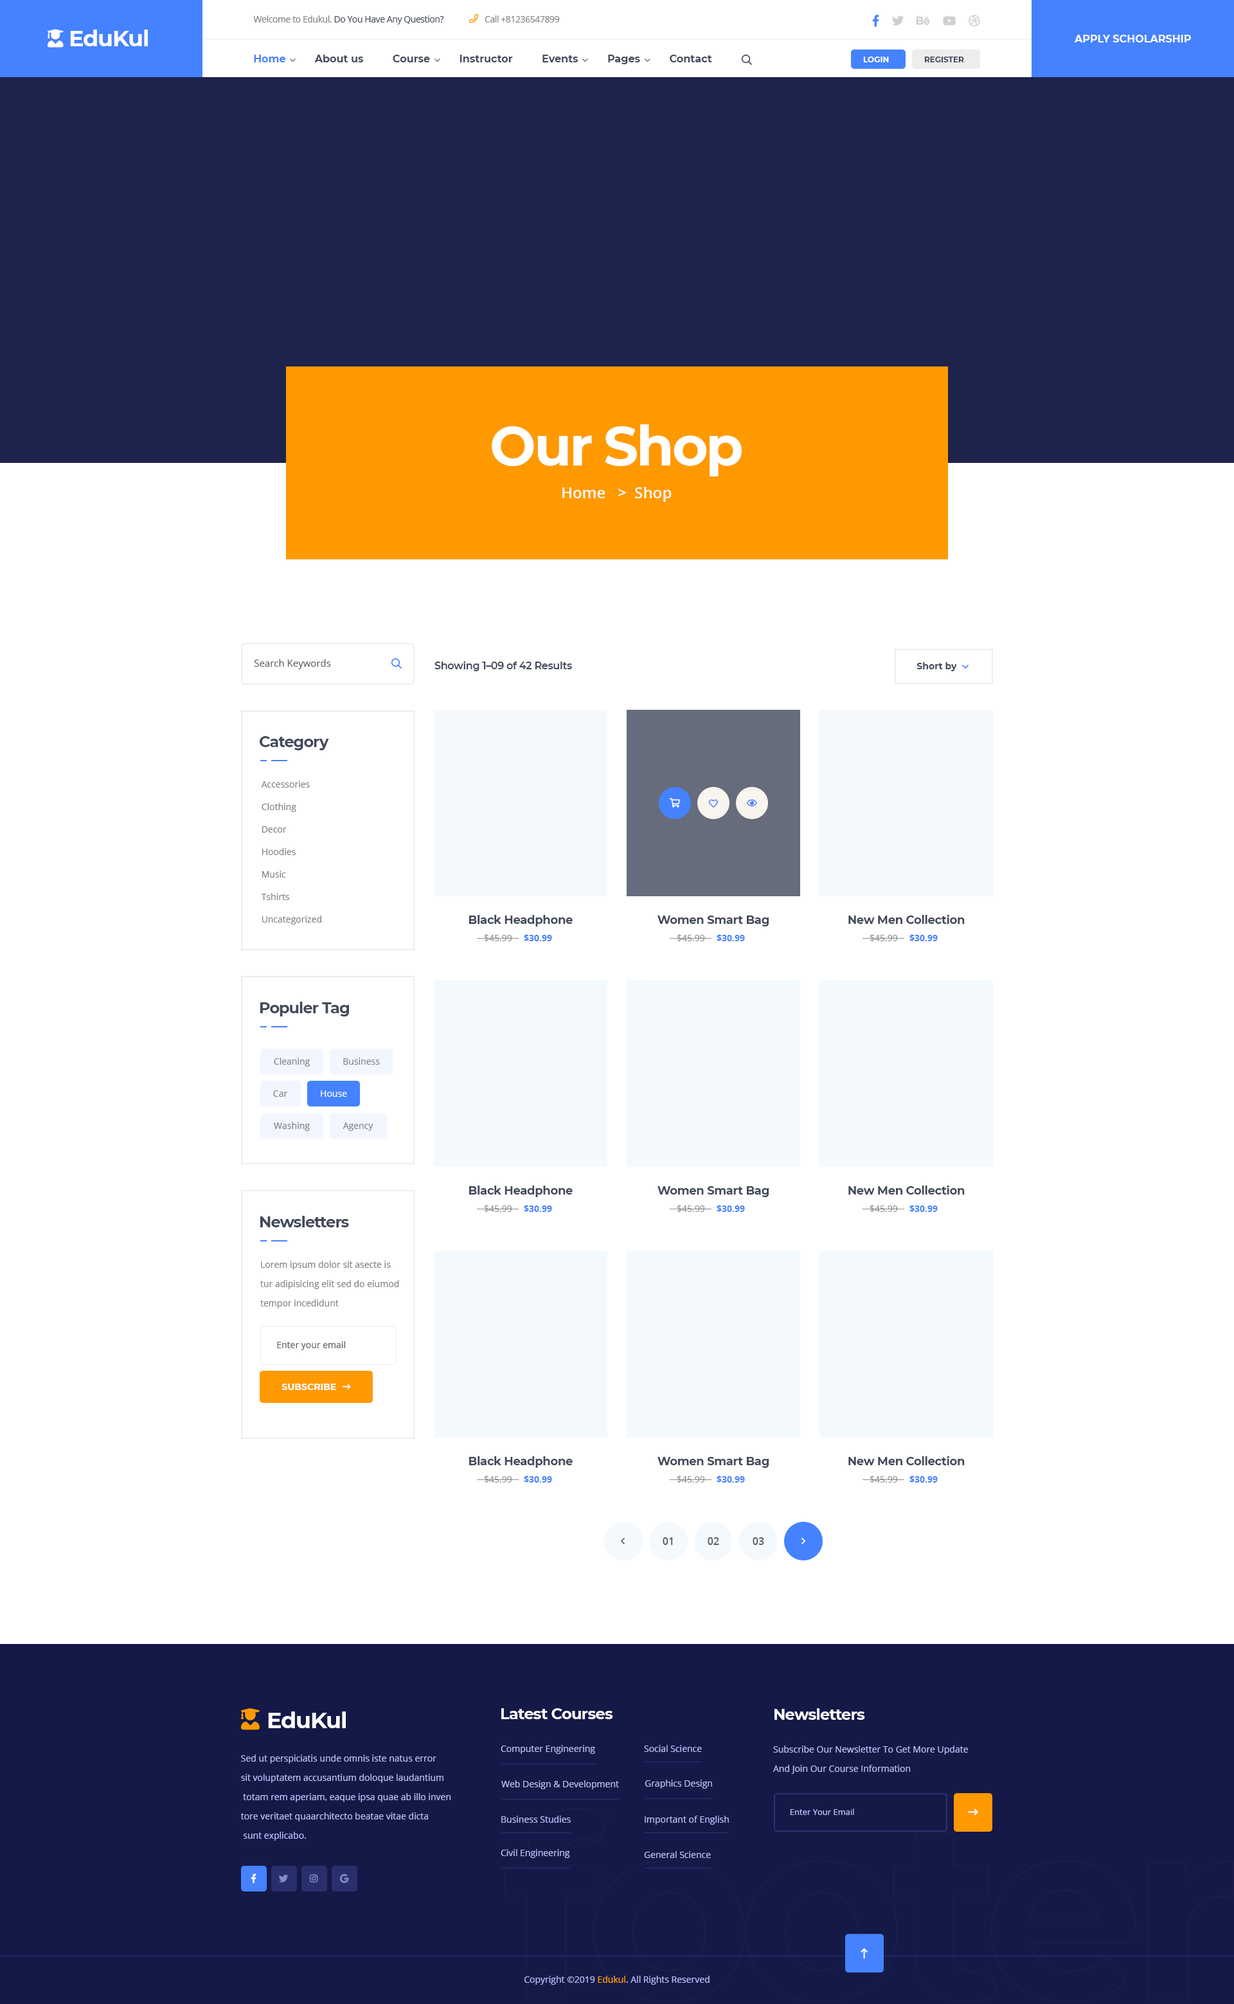
<style>
.page{position:relative;width:1234px;height:2004px;background:#ffffff}
.page>*{position:absolute;margin:0}
.t1{font:9px "OpenSans-Regular";letter-spacing:-0.03em;color:#42495b}
.t2{font:9px "OpenSans-Regular";letter-spacing:-0.03em;color:#808080}
.t3{font:22.5px "Montserrat-Bold";letter-spacing:-0.03em;color:#ffffff}
.t4{font:10.3px "Montserrat-Bold";color:#ffffff;text-transform:uppercase}
.t5{font:10.3px "Montserrat-Bold";color:#42495b}
.t6{font:10.3px "Montserrat-Bold";color:#4582ff}
.t7{font:7.7px "Montserrat-Bold";color:#ffffff;text-transform:uppercase}
.t8{font:7.7px "Montserrat-Bold";color:#42495b;text-transform:uppercase}
.t9{font:54.6px "Montserrat-Bold";letter-spacing:-0.04em;color:#ffffff}
.t10{font:15.4px "OpenSans-SemiBold";color:#ffffff}
.t11{font:9.6px "OpenSans-Regular";color:#5f5f5f}
.t12{font:10.3px "Montserrat-SemiBold";letter-spacing:-0.02em;color:#42495b}
.t13{font:9px "Montserrat-Bold";color:#42495b}
.t14{font:15.4px "Montserrat-Bold";letter-spacing:-0.04em;color:#42495b}
.t15{font:9px/22.5px "OpenSans-Regular";color:#808080}
.t16{font:11.6px "Montserrat-Bold";letter-spacing:-0.02em;color:#42495b}
.t17{font:9px "OpenSans-Regular";color:#8f8f8f}
.t18{font:9px "OpenSans-Bold";color:#4582ff}
.t19{font:9px "OpenSans-Regular";color:#808080}
.t20{font:9px "OpenSans-Regular";color:#ffffff}
.t21{font:9px/19.3px "OpenSans-Regular";color:#808080}
.t22{font:9px "OpenSans-Regular";color:#5f5f5f}
.t23{font:9px "Montserrat-Bold";color:#ffffff;text-transform:uppercase}
.t24{font:10.3px "OpenSans-SemiBold";color:#5f5f5f}
.t25{font:15.4px "Montserrat-Bold";letter-spacing:-0.03em;color:#ffffff}
.t26{font:9px "OpenSans-Regular";color:#b8bdf2}
.t27{font:9px/19.3px "OpenSans-Regular";color:#b8bdf2}
.t28{font:8.4px "OpenSans-Regular";color:#b8bdf2}
.t29{font:9px "OpenSans-Regular";color:#ff9900}
.t30{font:9px "OpenSans-Regular";color:#d3cfff}
</style>
<div class="page">
<p class="t1" style="left:253px;top:15px;width:191px;height:9px"><span class="t2">Welcome to Edukul. </span>Do You Have Any Question?</p>
<p class="t2" style="left:485px;top:15px;width:75px;height:7px">Call +81236547899</p>
<p class="t3" style="left:70px;top:30px;width:78px;height:16px">EduKul</p>
<p class="t4" style="left:1074px;top:35px;width:117px;height:7px">Apply scholarship</p>
<p class="t5" style="left:254px;top:55px;width:458px;height:9px"><span class="t6">Home</span>          About us          Course          Instructor          Events          Pages          Contact</p>
<p class="t7" style="left:863px;top:57px;width:26px;height:5px">login</p>
<p class="t8" style="left:924px;top:57px;width:40px;height:5px">register</p>
<p class="t9" style="left:492px;top:424px;width:250px;height:52px">Our Shop</p>
<p class="t10" style="left:562px;top:487px;width:110px;height:15px">Home   &gt;  Shop</p>
<p class="t11" style="left:254px;top:659px;width:77px;height:10px">Search Keywords</p>
<p class="t12" style="left:435px;top:661px;width:137px;height:10px">Showing 1–09 of 42 Results</p>
<p class="t13" style="left:917px;top:662px;width:40px;height:9px">Short by</p>
<p class="t14" style="left:259px;top:736px;width:70px;height:14px">Category</p>
<p class="t15" style="left:261px;top:780px;width:60px;height:144px">Accessories<br>Clothing<br>Decor<br>Hoodies<br>Music<br>Tshirts<br>Uncategorized</p>
<p class="t16" style="left:469px;top:915px;width:104px;height:11px">Black Headphone</p>
<p class="t16" style="left:658px;top:915px;width:111px;height:11px">Women Smart Bag</p>
<p class="t16" style="left:849px;top:915px;width:116px;height:9px">New Men Collection</p>
<p class="t17" style="left:484px;top:934px;width:68px;height:8px">$45.99     <span class="t18">$30.99</span></p>
<p class="t17" style="left:677px;top:934px;width:68px;height:8px">$45.99     <span class="t18">$30.99</span></p>
<p class="t17" style="left:870px;top:934px;width:68px;height:8px">$45.99     <span class="t18">$30.99</span></p>
<p class="t14" style="left:260px;top:1002px;width:89px;height:14px">Populer Tag</p>
<p class="t19" style="left:274px;top:1058px;width:36px;height:8px">Cleaning</p>
<p class="t19" style="left:343px;top:1058px;width:37px;height:7px">Business</p>
<p class="t19" style="left:273px;top:1090px;width:15px;height:7px">Car</p>
<p class="t20" style="left:321px;top:1090px;width:26px;height:7px">House</p>
<p class="t19" style="left:274px;top:1122px;width:36px;height:9px">Washing</p>
<p class="t19" style="left:343px;top:1122px;width:31px;height:9px">Agency</p>
<p class="t16" style="left:469px;top:1185px;width:104px;height:12px">Black Headphone</p>
<p class="t16" style="left:658px;top:1186px;width:111px;height:11px">Women Smart Bag</p>
<p class="t16" style="left:849px;top:1185px;width:116px;height:9px">New Men Collection</p>
<p class="t17" style="left:484px;top:1205px;width:68px;height:7px">$45.99     <span class="t18">$30.99</span></p>
<p class="t17" style="left:677px;top:1205px;width:68px;height:7px">$45.99     <span class="t18">$30.99</span></p>
<p class="t17" style="left:870px;top:1205px;width:68px;height:7px">$45.99     <span class="t18">$30.99</span></p>
<p class="t14" style="left:260px;top:1216px;width:89px;height:11px">Newsletters</p>
<p class="t21" style="left:260px;top:1261px;width:139px;height:47px">Lorem ipsum dolor sit asecte is<br>tur adipisicing elit sed do eiumod tempor incedidunt</p>
<p class="t22" style="left:277px;top:1341px;width:68px;height:9px">Enter your email</p>
<p class="t23" style="left:282px;top:1383px;width:54px;height:7px">subscribe</p>
<p class="t16" style="left:469px;top:1456px;width:104px;height:12px">Black Headphone</p>
<p class="t16" style="left:658px;top:1457px;width:111px;height:11px">Women Smart Bag</p>
<p class="t16" style="left:849px;top:1456px;width:116px;height:9px">New Men Collection</p>
<p class="t17" style="left:484px;top:1475px;width:68px;height:8px">$45.99     <span class="t18">$30.99</span></p>
<p class="t17" style="left:677px;top:1475px;width:68px;height:8px">$45.99     <span class="t18">$30.99</span></p>
<p class="t17" style="left:870px;top:1475px;width:68px;height:8px">$45.99     <span class="t18">$30.99</span></p>
<p class="t24" style="left:663px;top:1537px;width:10px;height:8px">01</p>
<p class="t24" style="left:708px;top:1537px;width:11px;height:8px">02</p>
<p class="t24" style="left:753px;top:1537px;width:11px;height:8px">03</p>
<p class="t25" style="left:501px;top:1708px;width:112px;height:11px">Latest Courses</p>
<p class="t25" style="left:775px;top:1708px;width:90px;height:12px">Newsletters</p>
<p class="t3" style="left:268px;top:1711px;width:78px;height:17px">EduKul</p>
<p class="t26" style="left:501px;top:1745px;width:94px;height:9px">Computer Engineering</p>
<p class="t26" style="left:644px;top:1745px;width:58px;height:7px">Social Science</p>
<p class="t27" style="left:773px;top:1745px;width:195px;height:29px">Subscribe Our Newsletter To Get More Update<br>And Join Our Course Information</p>
<p class="t27" style="left:240px;top:1754px;width:211px;height:87px">Sed ut perspiciatis unde omnis iste natus error <br>sit voluptatem accusantium doloque laudantium<br> totam rem aperiam, eaque ipsa quae ab illo inven<br>tore veritaet quaarchitecto beatae vitae dicta<br> sunt explicabo. <br>Nemo enim ipsam voluptatem quia</p>
<p class="t26" style="left:501px;top:1780px;width:118px;height:9px">Web Design &amp; Development</p>
<p class="t26" style="left:645px;top:1779px;width:67px;height:9px">Graphics Design</p>
<p class="t26" style="left:501px;top:1815px;width:70px;height:8px">Business Studies</p>
<p class="t26" style="left:645px;top:1815px;width:84px;height:9px">Important of English</p>
<p class="t28" style="left:790px;top:1808px;width:64px;height:7px">Enter Your Email</p>
<p class="t26" style="left:501px;top:1849px;width:69px;height:9px">Civil Engineering</p>
<p class="t26" style="left:644px;top:1851px;width:67px;height:7px">General Science</p>
<p class="t26" style="left:525px;top:1976px;width:185px;height:9px">Copyright ©2019 <span class="t29">Edukul</span><span class="t30">. </span>All Rights Reserved</p>
</div>
